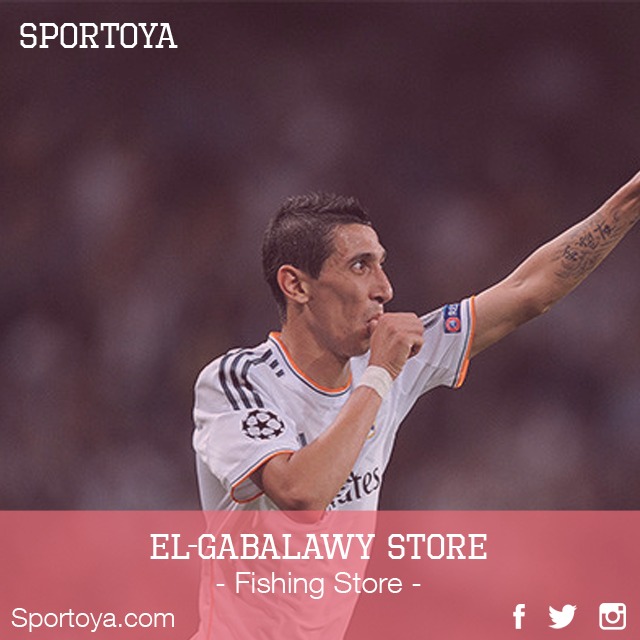
<style>
.page{position:relative;width:640px;height:640px}
.page>*{position:absolute;margin:0}
.t1{font:36px "OctinSportsRg-Regular";color:#ffffff}
.t2{font:30px "HelveticaNeueLTCom-Lt";color:#ffffff}
.t3{font:27px "HelveticaNeueLTCom-Lt";color:#ffffff}
</style>
<div class="page">
<p class="t1" style="left:20px;top:23px;width:158px;height:25px">SPORTOYa</p>
<p class="t1" style="left:150px;top:534px;width:337px;height:25px">EL-GABALAWY STORE</p>
<p class="t2" style="left:216px;top:572px;width:205px;height:27px">- Fishing Store -</p>
<p class="t3" style="left:11px;top:608px;width:163px;height:24px">Sportoya.com</p>
</div>
